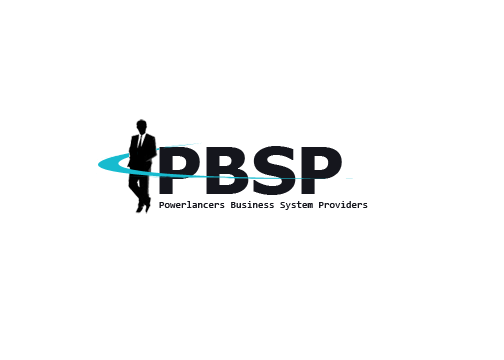
<style>
.page{position:relative;width:504px;height:360px;background:#ffffff}
.page>*{position:absolute;margin:0}
.t1{font:65.5px "Tahoma-Bold";color:#15161d;scale:1.1 1}
.t2{font:10px "Consolas";color:#15161d}
</style>
<div class="page">
<p class="t1" style="left:159px;top:146px;width:183px;height:49px">PBSP</p>
<p class="t2" style="left:159px;top:201px;width:209px;height:9px">Powerlancers Business System Providers</p>
</div>
